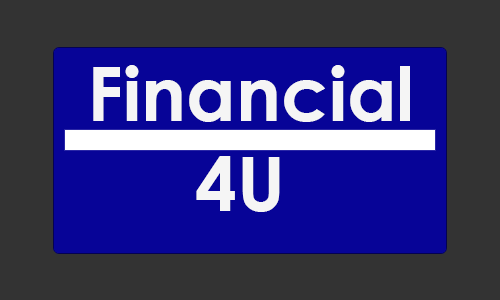
<style>
.page{position:relative;width:500px;height:300px;background:#333333}
.page>*{position:absolute;margin:0}
.t1{font:75px "CenturyGothic-Bold";color:#f5f5f5}
</style>
<div class="page">
<p class="t1" style="left:93px;top:65px;width:317px;height:147px">Financial<br>   4U</p>
</div>
